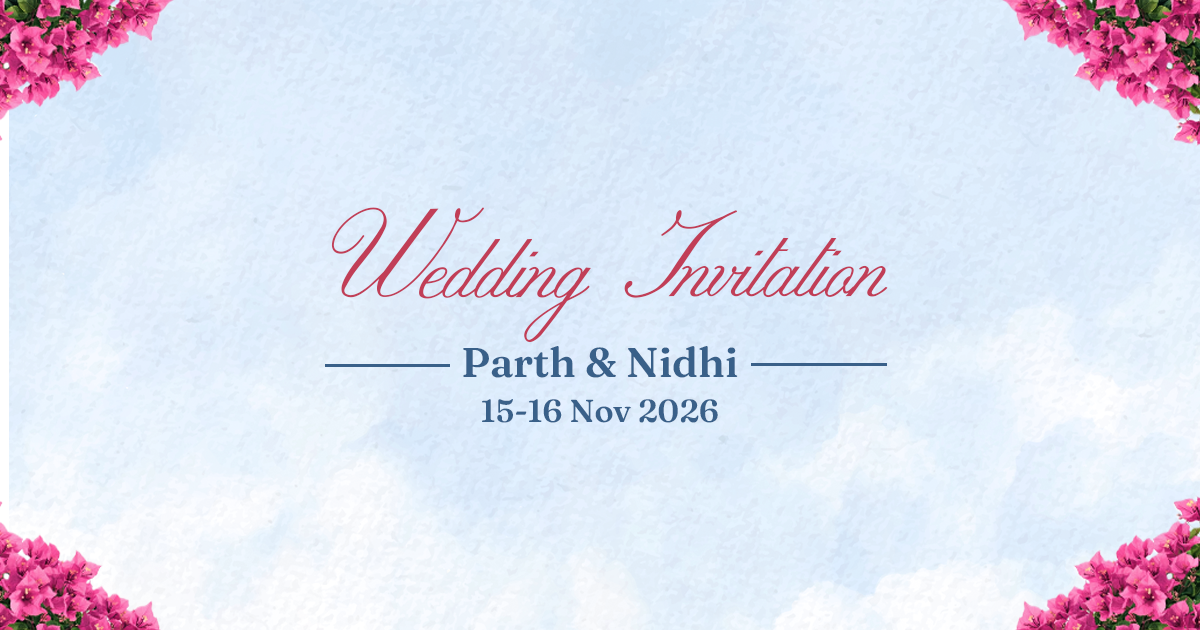
<style>
.page{position:relative;width:1200px;height:630px}
.page>*{position:absolute;margin:0}
.t1{font:120.2px "ROSEMARRYESCRIPTPERSONALUSE-Ita";color:#c13e57}
.t2{font:41.6px "Fraunces-SemiBold";color:#396089}
.t3{font:31.8px "Fraunces-SemiBold";color:#396089}
</style>
<div class="page">
<p class="t1" style="left:331px;top:207px;width:557px;height:135px">Wedding Invitation</p>
<p class="t2" style="left:463px;top:346px;width:275px;height:32px">Parth &amp; Nidhi</p>
<p class="t3" style="left:482px;top:399px;width:236px;height:24px">15-16 Nov 2026</p>
</div>
